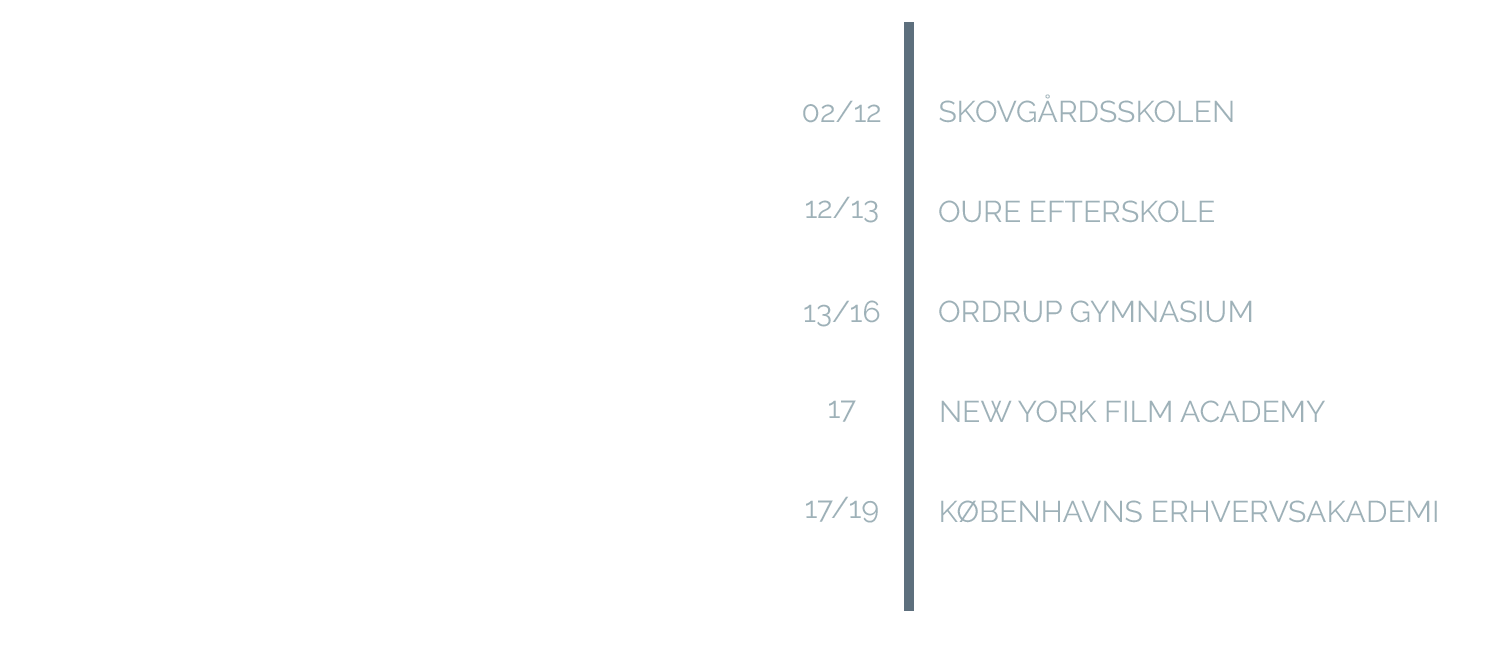
<style>
.page{position:relative;width:1504px;height:654px;background:#ffffff}
.page>*{position:absolute;margin:0}
.t1{font:30px "Raleway-Regular";color:#9eb1b8;text-transform:uppercase}
</style>
<div class="page">
<p class="t1" style="left:803px;top:100px;width:78px;height:23px">02/12</p>
<p class="t1" style="left:939px;top:94px;width:294px;height:29px">Skovgårdsskolen</p>
<p class="t1" style="left:806px;top:196px;width:72px;height:27px">12/13</p>
<p class="t1" style="left:939px;top:200px;width:275px;height:23px">Oure Efterskole</p>
<p class="t1" style="left:804px;top:300px;width:76px;height:27px">13/16</p>
<p class="t1" style="left:939px;top:300px;width:313px;height:23px">Ordrup gymnasium</p>
<p class="t1" style="left:829px;top:400px;width:27px;height:22px">17</p>
<p class="t1" style="left:941px;top:400px;width:384px;height:23px">New York Film Academy</p>
<p class="t1" style="left:806px;top:496px;width:72px;height:27px">17/19</p>
<p class="t1" style="left:941px;top:500px;width:496px;height:23px">Københavns erhvervsakademi</p>
</div>
